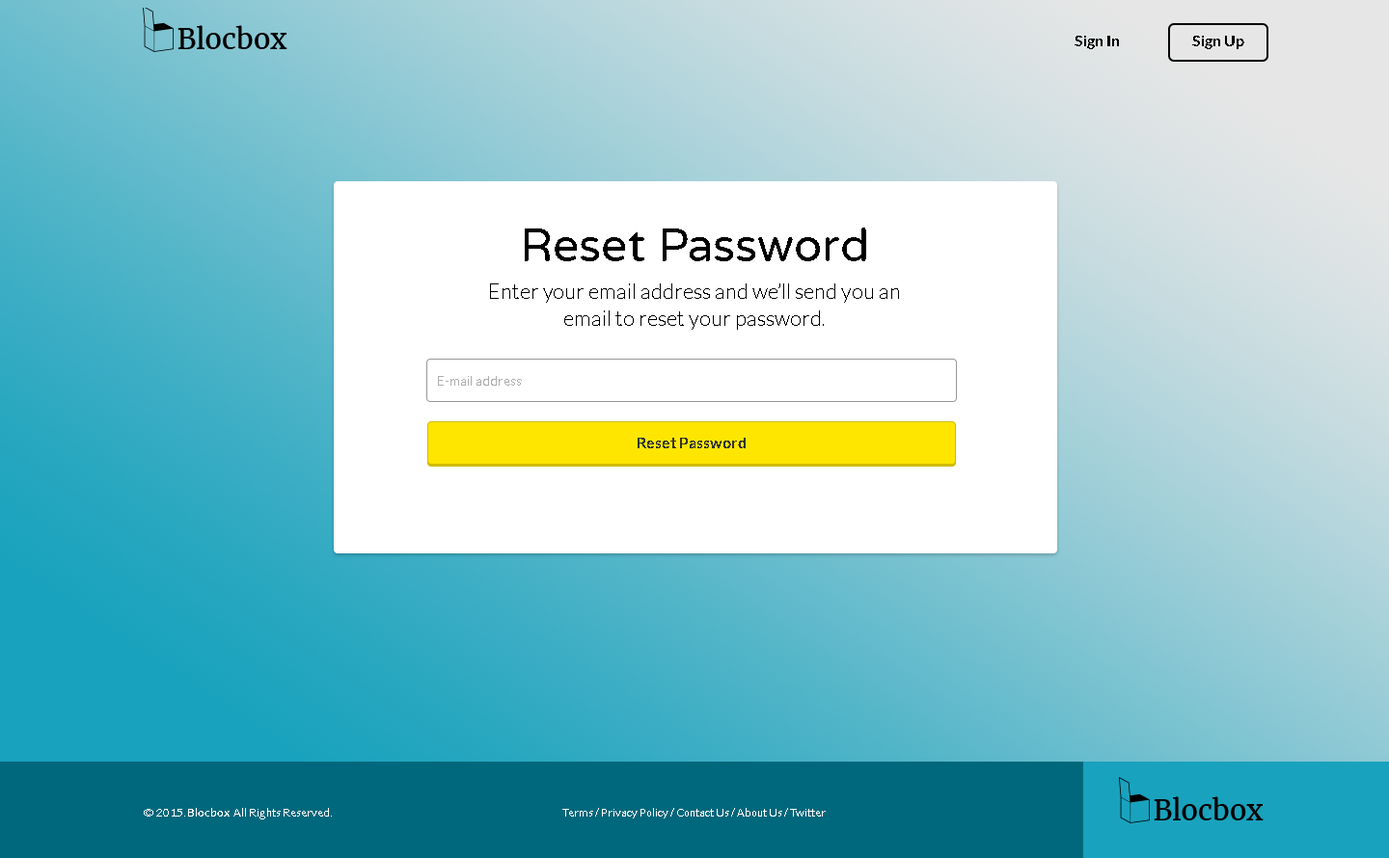
<style>
.page{position:relative;width:1389px;height:858px}
.page>*{position:absolute;margin:0}
.t1{font:15.4px "Lato-Bold";color:#000000}
.t2{font:46.3px "VarelaRound-Regular";color:#000000}
.t3{font:21.2px/27px "Lato-Light";color:#000000}
.t4{font:13.5px "Lato-Light";color:#adadad}
.t5{font:15.4px "Lato-Bold";color:#333333}
.t6{font:11.6px "Lato-Light";color:#ffffff}
.t7{font:11.6px "Lato-Bold";color:#ffffff}
</style>
<div class="page">
<p class="t1" style="left:1075px;top:36px;width:44px;height:13px">Sign In</p>
<p class="t1" style="left:1192px;top:36px;width:52px;height:13px">Sign Up</p>
<p class="t2" style="left:525px;top:228px;width:341px;height:33px">Reset Password</p>
<p class="t3" style="left:490px;top:284px;width:409px;height:46px;text-align:center">Enter your email address and we’ll send you an<br>email to reset your password.</p>
<p class="t4" style="left:438px;top:376px;width:84px;height:10px">E-mail address</p>
<p class="t5" style="left:638px;top:438px;width:108px;height:11px">Reset Password</p>
<p class="t6" style="left:144px;top:808px;width:188px;height:12px">© 2015. <span class="t7">Blocbox </span>­ All Rights Reserved.</p>
<p class="t6" style="left:562px;top:808px;width:264px;height:11px">Terms / Privacy Policy / Contact Us / About Us / Twitter</p>
</div>
